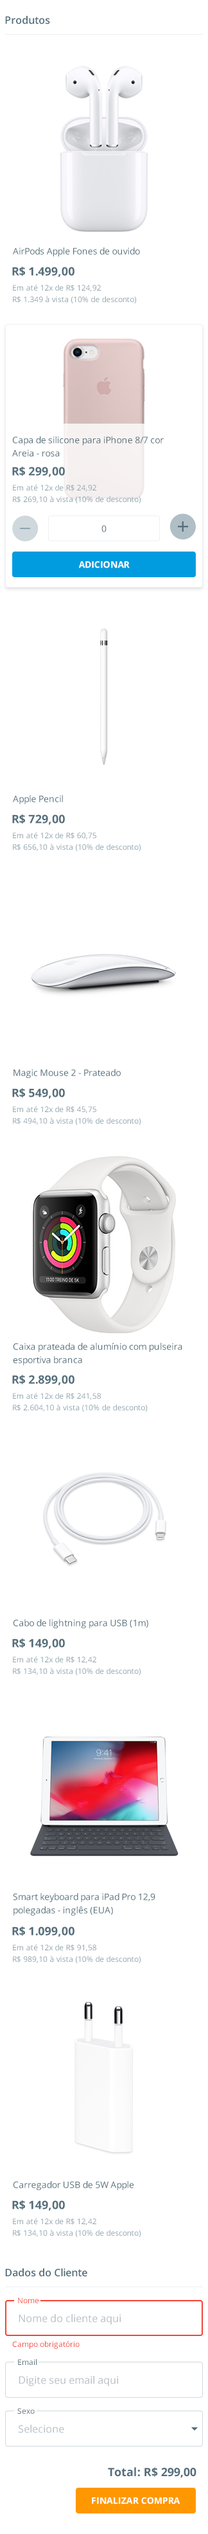
<style>
.page{position:relative;width:208px;height:2534px;background:#ffffff}
.page>*{position:absolute;margin:0}
.t1{font:10.3px "OpenSans-SemiBold";color:#546e7a}
.t2{font:9px "OpenSans";color:#546e7a}
.t3{font:11.6px "OpenSans-Bold";color:#546e7a}
.t4{font:7.7px/11.6px "OpenSans";color:#90a4ae}
.t5{font:9px/13.2px "OpenSans";color:#546e7a}
.t6{font:9px "OpenSans-Bold";color:#ffffff;text-transform:uppercase}
.t7{font:9px/13.3px "OpenSans";color:#546e7a}
.t8{font:7.7px "OpenSans";color:#f44336}
.t9{font:10.3px "OpenSans";color:#b6bfc3}
.t10{font:7.7px "OpenSans";color:#546e7a}
</style>
<div class="page">
<p class="t1" style="left:5px;top:15px;width:45px;height:9px">Produtos</p>
<p class="t2" style="left:13px;top:248px;width:127px;height:9px">AirPods Apple Fones de ouvido</p>
<p class="t3" style="left:12px;top:266px;width:63px;height:11px">R$ 1.499,00</p>
<p class="t4" style="left:13px;top:284px;width:123px;height:19px">Em até 12x de R$ 124,92<br>R$ 1.349 à vista (10% de desconto)</p>
<p class="t5" style="left:12px;top:436px;width:152px;height:21px">Capa de silicone para iPhone 8/7 cor<br>Areia - rosa</p>
<p class="t3" style="left:12px;top:466px;width:53px;height:11px">R$ 299,00</p>
<p class="t4" style="left:13px;top:484px;width:128px;height:19px">Em até 12x de R$ 24,92<br>R$ 269,10 à vista (10% de desconto)</p>
<p class="t2" style="left:102px;top:525px;width:5px;height:7px">0</p>
<p class="t6" style="left:78px;top:561px;width:52px;height:7px">adicionar</p>
<p class="t2" style="left:13px;top:795px;width:50px;height:9px">Apple Pencil</p>
<p class="t3" style="left:12px;top:814px;width:53px;height:11px">R$ 729,00</p>
<p class="t4" style="left:13px;top:832px;width:128px;height:19px">Em até 12x de R$ 60,75<br>R$ 656,10 à vista (10% de desconto)</p>
<p class="t2" style="left:14px;top:1069px;width:107px;height:9px">Magic Mouse 2 - Prateado</p>
<p class="t3" style="left:12px;top:1088px;width:53px;height:11px">R$ 549,00</p>
<p class="t4" style="left:13px;top:1106px;width:128px;height:19px">Em até 12x de R$ 45,75<br>R$ 494,10 à vista (10% de desconto)</p>
<p class="t7" style="left:13px;top:1343px;width:170px;height:22px">Caixa prateada de alumínio com pulseira<br>esportiva branca</p>
<p class="t3" style="left:12px;top:1374px;width:63px;height:11px">R$ 2.899,00</p>
<p class="t4" style="left:13px;top:1392px;width:135px;height:20px">Em até 12x de R$ 241,58<br>R$ 2.604,10 à vista (10% de desconto)</p>
<p class="t2" style="left:13px;top:1619px;width:136px;height:9px">Cabo de lightning para USB (1m)</p>
<p class="t3" style="left:12px;top:1638px;width:53px;height:11px">R$ 149,00</p>
<p class="t4" style="left:13px;top:1656px;width:128px;height:19px">Em até 12x de R$ 12,42<br>R$ 134,10 à vista (10% de desconto)</p>
<p class="t7" style="left:13px;top:1893px;width:143px;height:23px">Smart keyboard para iPad Pro 12,9<br>polegadas - inglês (EUA)</p>
<p class="t3" style="left:12px;top:1926px;width:63px;height:11px">R$ 1.099,00</p>
<p class="t4" style="left:13px;top:1944px;width:128px;height:19px">Em até 12x de R$ 91,58<br>R$ 989,10 à vista (10% de desconto)</p>
<p class="t2" style="left:13px;top:2181px;width:121px;height:9px">Carregador USB de 5W Apple</p>
<p class="t3" style="left:12px;top:2200px;width:53px;height:11px">R$ 149,00</p>
<p class="t4" style="left:13px;top:2218px;width:128px;height:19px">Em até 12x de R$ 12,42<br>R$ 134,10 à vista (10% de desconto)</p>
<p class="t1" style="left:5px;top:2268px;width:82px;height:9px">Dados do Cliente</p>
<p class="t8" style="left:18px;top:2298px;width:21px;height:5px">Nome</p>
<p class="t9" style="left:19px;top:2314px;width:102px;height:11px">Nome do cliente aqui</p>
<p class="t8" style="left:12px;top:2341px;width:68px;height:8px">Campo obrigatório</p>
<p class="t10" style="left:18px;top:2359px;width:19px;height:6px">Email</p>
<p class="t9" style="left:19px;top:2376px;width:99px;height:10px">Digite seu email aqui</p>
<p class="t10" style="left:17px;top:2408px;width:18px;height:6px">Sexo</p>
<p class="t9" style="left:19px;top:2425px;width:45px;height:8px">Selecione</p>
<p class="t3" style="left:108px;top:2467px;width:89px;height:11px">Total: R$ 299,00</p>
<p class="t6" style="left:92px;top:2497px;width:88px;height:8px">finalizar compra</p>
</div>
